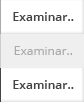
<style>
.page{position:relative;width:84px;height:102px;background:#ffffff}
.page>*{position:absolute;margin:0}
.t1{font:12px "OpenSans-Semibold";color:#444444}
.t2{font:12px "OpenSans";color:#aaaaaa}
</style>
<div class="page">
<p class="t1" style="left:13px;top:12px;width:61px;height:9px">Examinar..</p>
<p class="t2" style="left:14px;top:46px;width:59px;height:9px">Examinar..</p>
<p class="t1" style="left:13px;top:80px;width:61px;height:9px">Examinar..</p>
</div>
